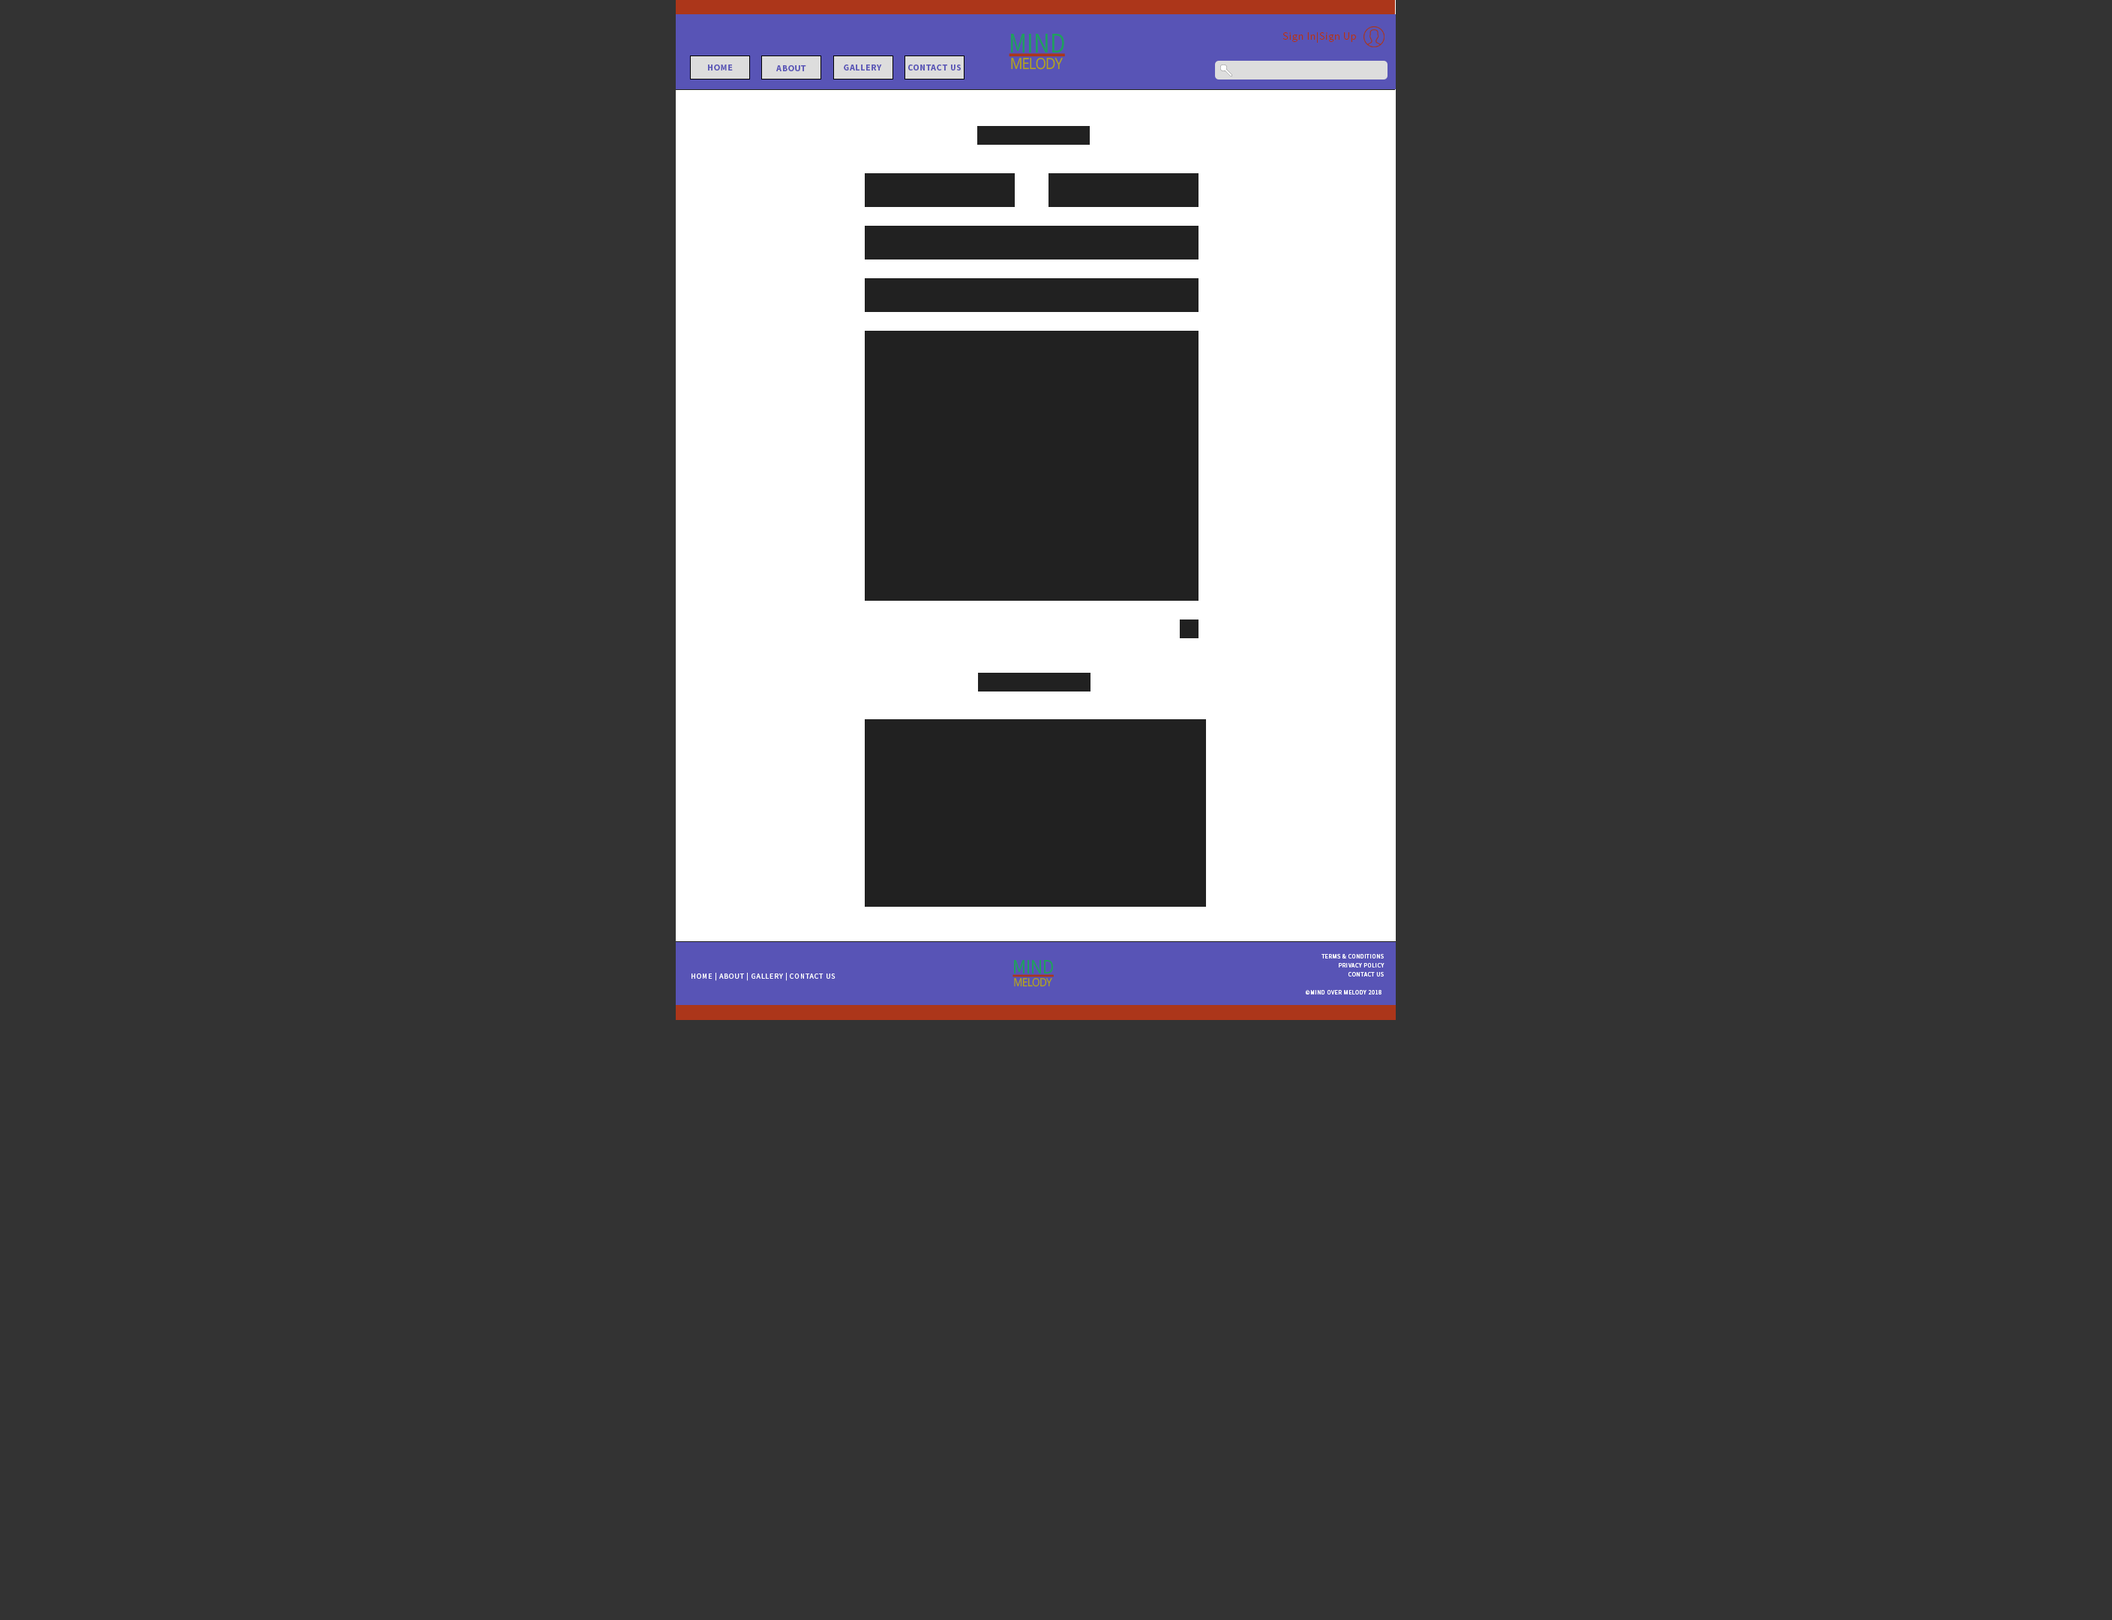
<style>
.page{position:relative;width:2112px;height:1620px;background:#333333}
.page>*{position:absolute;margin:0}
.t1{font:10.5px "SourceSansPro-Regular";letter-spacing:0.05em;color:#ac361a}
.t2{font:9px "SourceSansPro-Bold";letter-spacing:0.05em;color:#5854b6}
.t3{font:6px/9px "SourceSansPro-Regular";letter-spacing:0.065em;color:#ffffff}
.t4{font:7.5px "SourceSansPro-Regular";letter-spacing:0.08em;color:#ffffff}
</style>
<div class="page">
<p class="t1" style="left:1282px;top:31px;width:74px;height:12px">Sign In|Sign Up</p>
<p class="t2" style="left:708px;top:64px;width:25px;height:6px">HOME</p>
<p class="t2" style="left:776px;top:65px;width:30px;height:6px">ABOUT</p>
<p class="t2" style="left:844px;top:64px;width:38px;height:6px">GALLERY</p>
<p class="t2" style="left:908px;top:64px;width:53px;height:6px">CONTACT US</p>
<p class="t3" style="left:1305px;top:954px;width:79px;height:40px;text-align:right">TERMS &amp; CONDITIONS<br>PRIVACY POLICY<br>CONTACT US<br><br>©MIND OVER MELODY 2018</p>
<p class="t4" style="left:691px;top:973px;width:144px;height:8px">HOME | ABOUT | GALLERY | CONTACT US</p>
</div>
